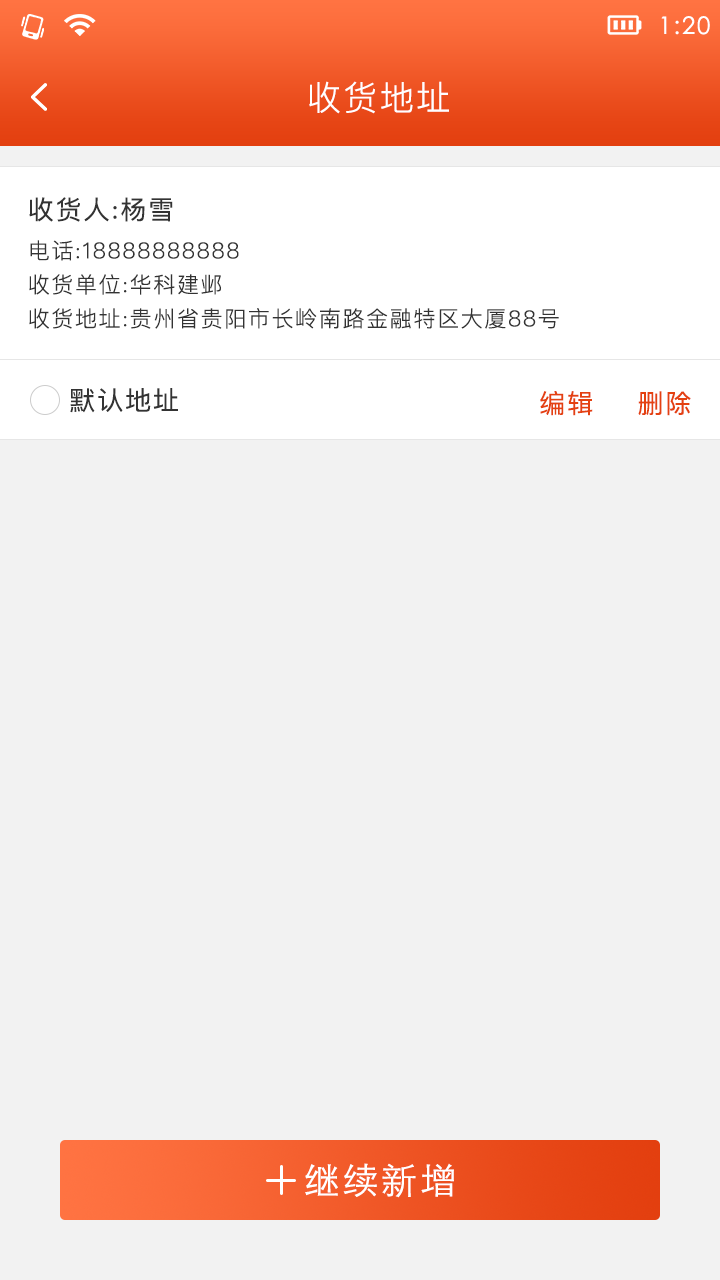
<style>
.page{position:relative;width:720px;height:1280px;background:#f2f2f2}
.page>*{position:absolute;margin:0}
.t1{font:24px "STXihei";letter-spacing:0.075em;color:#ffffff}
.t2{font:34px "PingFangSC-Light";letter-spacing:0.075em;color:#ffffff}
.t3{font:22px/34px "PingFangSC-Light";letter-spacing:0.075em;color:#333333}
.t4{font:26px/43px "PingFangSC-Regular";letter-spacing:0.075em;color:#333333}
.t5{font:26px "PingFangSC-Regular";letter-spacing:0.075em;color:#333333}
.t6{font:26px "PingFangSC-Regular";letter-spacing:0.075em;color:#e44111}
.t7{font:36px "STHeitiSC-Light";letter-spacing:0.075em;color:#ffffff}
</style>
<div class="page">
<p class="t1" style="left:661px;top:16px;width:49px;height:19px">1:20</p>
<p class="t2" style="left:309px;top:81px;width:140px;height:33px">收货地址</p>
<p class="t3" style="left:29px;top:197px;width:530px;height:132px"><span class="t4">收货人:杨雪<br></span>电话:18888888888<br>收货单位:华科建邺<br>收货地址:贵州省贵阳市长岭南路金融特区大厦88号</p>
<p class="t5" style="left:70px;top:388px;width:108px;height:25px">默认地址</p>
<p class="t6" style="left:540px;top:391px;width:151px;height:25px">编辑    删除</p>
<p class="t7" style="left:305px;top:1163px;width:149px;height:35px">继续新增</p>
</div>
